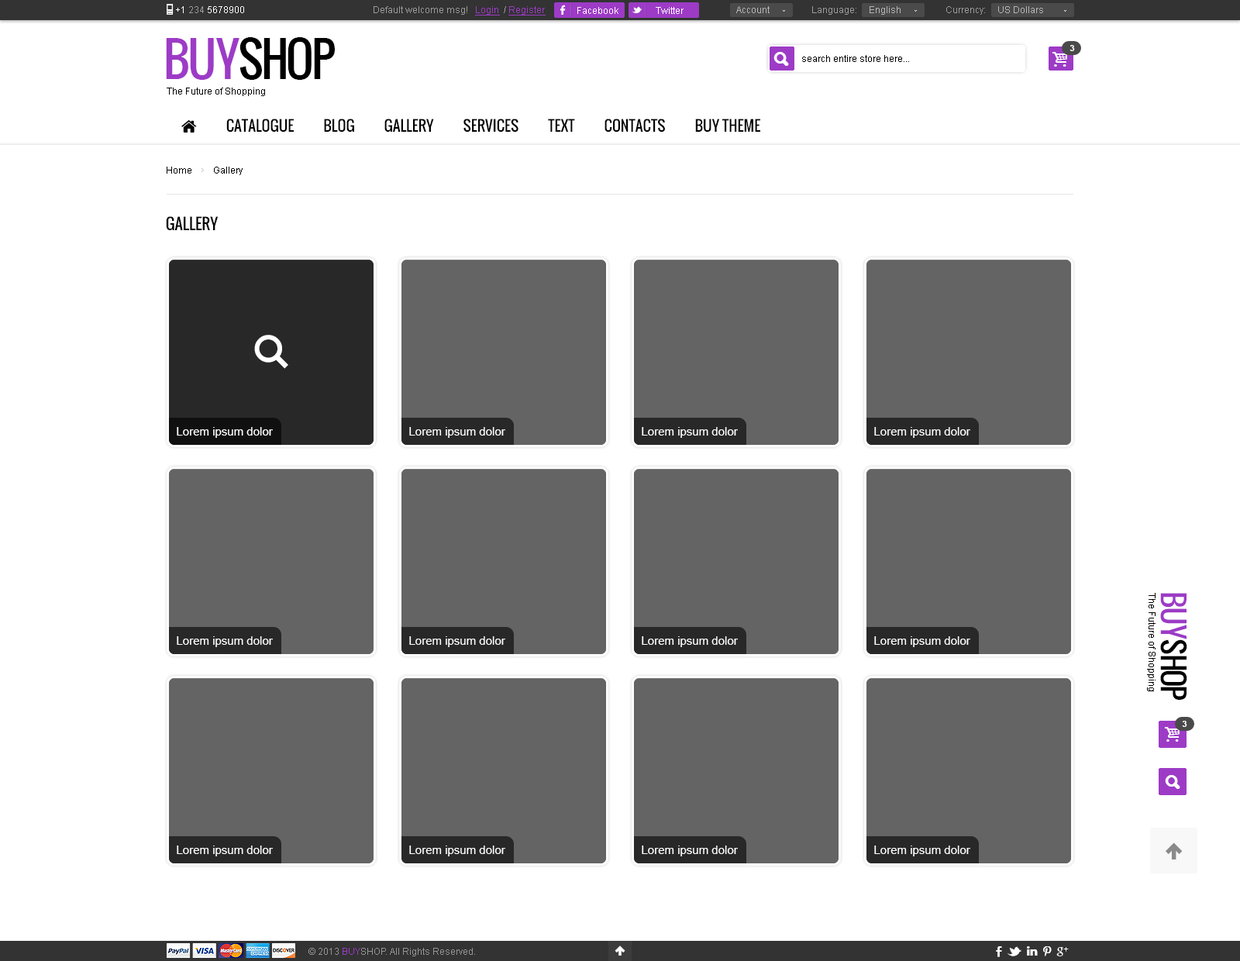
<style>
.page{position:relative;width:1240px;height:961px;background:#ffffff}
.page>*{position:absolute;margin:0}
.t1{font:9.3px "ArialMT";color:#ffffff}
.t2{font:9.3px "ArialMT";color:#9b9b9b}
.t3{font:9.3px "ArialMT";color:#9d3bc6;text-decoration:underline}
.t4{font:9.3px "ArialMT";color:#b6b6b6}
.t5{font:46.5px "Oswald";letter-spacing:-0.06em;color:#000000;text-transform:uppercase}
.t6{font:46.5px "Oswald";letter-spacing:-0.06em;color:#9d3bc6;text-transform:uppercase}
.t7{font:8.5px "Arial-BoldMT";color:#ffffff;text-transform:uppercase}
.t8{font:9.3px "ArialMT";color:#000000}
.t9{font:15.5px "Oswald";color:#000000;text-transform:uppercase}
.t10{font:11.6px "ArialMT";color:#ffffff}
.t11{font:29.5px "Oswald";letter-spacing:-0.06em;color:#000000;text-transform:uppercase}
.t12{font:29.5px "Oswald";letter-spacing:-0.06em;color:#9d3bc6;text-transform:uppercase}
.t13{font:9.3px "ArialMT";color:#959595}
.t14{font:9.3px "ArialMT";color:#9d3bc6}
</style>
<div class="page">
<p class="t1" style="left:176px;top:6px;width:68px;height:7px">+1 <span class="t2">234 </span>5678900</p>
<p class="t2" style="left:374px;top:6px;width:172px;height:10px">Default welcome msg!   <span class="t3">Login </span> / <span class="t3">Register</span></p>
<p class="t2" style="left:374px;top:6px;width:172px;height:10px">Default welcome msg!   <span class="t3">Login </span> / <span class="t3">Register</span></p>
<p class="t1" style="left:578px;top:7px;width:41px;height:7px">Facebook</p>
<p class="t1" style="left:656px;top:7px;width:28px;height:7px">Twitter</p>
<p class="t4" style="left:736px;top:6px;width:34px;height:7px">Account</p>
<p class="t2" style="left:812px;top:6px;width:89px;height:9px">Language:     <span class="t4">English</span></p>
<p class="t4" style="left:947px;top:6px;width:96px;height:9px"><span class="t2">Currency:     </span>US Dollars</p>
<p class="t5" style="left:166px;top:37px;width:169px;height:43px"><span class="t6">buy</span>shop</p>
<p class="t7" style="left:1070px;top:45px;width:5px;height:6px">3</p>
<p class="t8" style="left:802px;top:55px;width:107px;height:7px">search entire store here...</p>
<p class="t8" style="left:167px;top:88px;width:98px;height:8px">The Future of Shopping</p>
<p class="t8" style="left:167px;top:167px;width:76px;height:8px">Home         Gallery</p>
<p class="t9" style="left:166px;top:216px;width:53px;height:15px">GALLERY</p>
<p class="t10" style="left:177px;top:427px;width:96px;height:11px">Lorem ipsum dolor</p>
<p class="t10" style="left:409px;top:427px;width:96px;height:11px">Lorem ipsum dolor</p>
<p class="t10" style="left:642px;top:427px;width:96px;height:11px">Lorem ipsum dolor</p>
<p class="t10" style="left:874px;top:427px;width:97px;height:11px">Lorem ipsum dolor</p>
<p class="t8" style="left:1147px;top:593px;width:9px;height:99px;rotate:90deg">The Future of Shopping</p>
<p class="t11" style="left:1161px;top:593px;width:27px;height:107px;rotate:90deg"><span class="t12">buy</span>shop</p>
<p class="t10" style="left:177px;top:636px;width:96px;height:11px">Lorem ipsum dolor</p>
<p class="t10" style="left:409px;top:636px;width:96px;height:11px">Lorem ipsum dolor</p>
<p class="t10" style="left:642px;top:636px;width:96px;height:11px">Lorem ipsum dolor</p>
<p class="t10" style="left:874px;top:636px;width:97px;height:11px">Lorem ipsum dolor</p>
<p class="t7" style="left:1182px;top:721px;width:6px;height:6px">3</p>
<p class="t10" style="left:177px;top:846px;width:96px;height:11px">Lorem ipsum dolor</p>
<p class="t10" style="left:409px;top:846px;width:96px;height:11px">Lorem ipsum dolor</p>
<p class="t10" style="left:642px;top:846px;width:96px;height:11px">Lorem ipsum dolor</p>
<p class="t10" style="left:874px;top:846px;width:97px;height:11px">Lorem ipsum dolor</p>
<p class="t13" style="left:309px;top:948px;width:166px;height:9px">© 2013 <span class="t14">BUY</span>SHOP. All Rights Reserved.</p>
</div>
